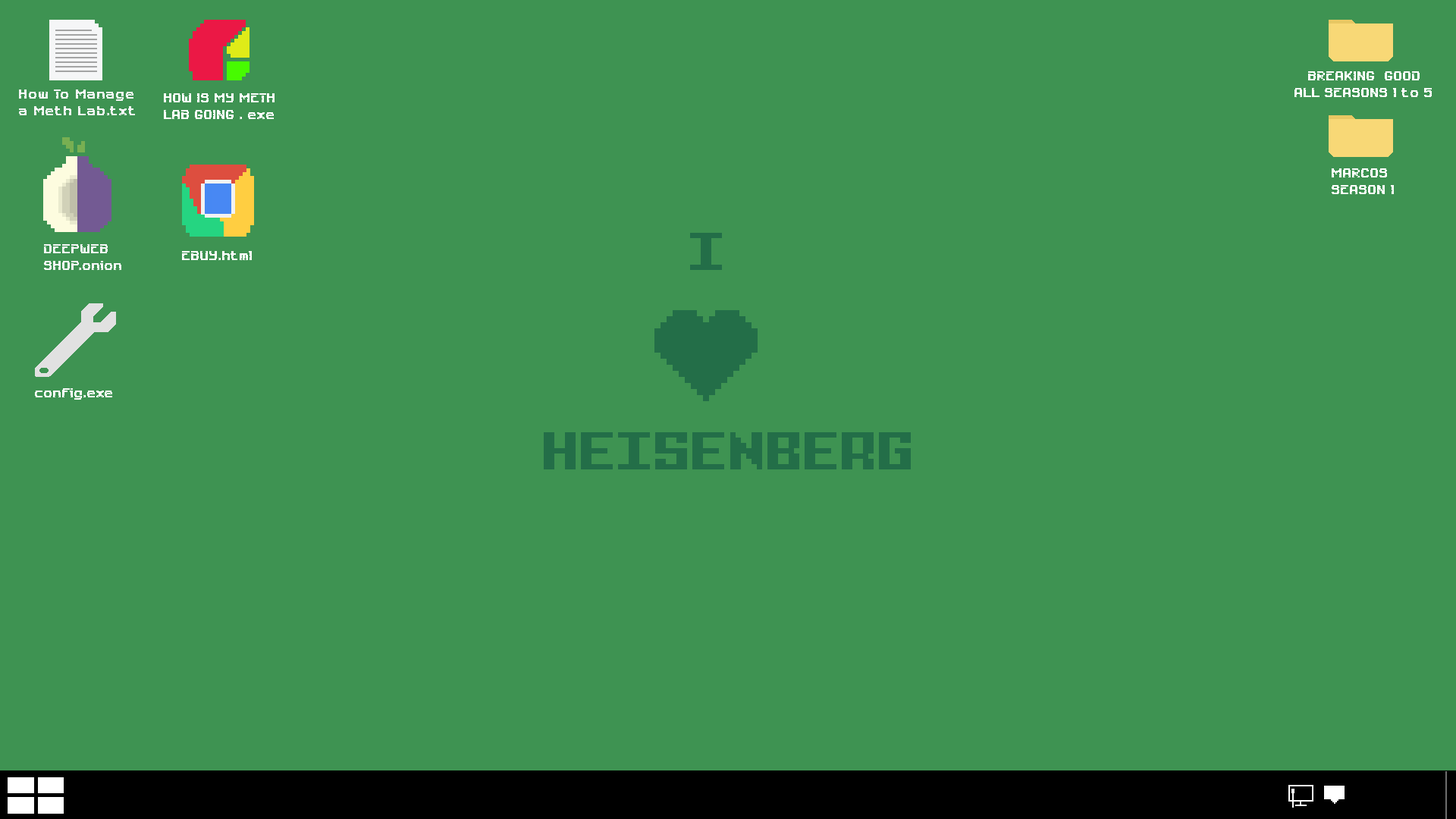
<style>
.page{position:relative;width:1456px;height:819px;background:#3e9352}
.page>*{position:absolute;margin:0}
.t1{font:13.6px "SixEightZeroNineChargen-Regular";color:#ffffff}
.t2{font:13.6px "SixEightZeroNineChargen-Regular";color:#f5f6f7}
.t3{font:54.6px "PixelIntv";color:#236e48}
</style>
<div class="page">
<p class="t1" style="left:1294px;top:71px;width:138px;height:26px">BREAKING  GOOD<br>ALL SEASONS 1 to 5</p>
<p class="t2" style="left:19px;top:89px;width:116px;height:26px">How To Manage<br>a Meth Lab.txt</p>
<p class="t1" style="left:164px;top:93px;width:111px;height:26px">HOW IS MY METH<br>LAB GOING . exe</p>
<p class="t1" style="left:1332px;top:168px;width:62px;height:26px">MARCOS<br>SEASON 1</p>
<p class="t3" style="left:690px;top:233px;width:32px;height:37px">I</p>
<p class="t2" style="left:44px;top:244px;width:77px;height:26px">DEEPWEB <br>SHOP.onion</p>
<p class="t1" style="left:182px;top:251px;width:70px;height:9px">EBUY.html</p>
<p class="t1" style="left:35px;top:388px;width:77px;height:12px">config.exe</p>
<p class="t3" style="left:544px;top:432px;width:367px;height:37px">HEISENBERG</p>
</div>
